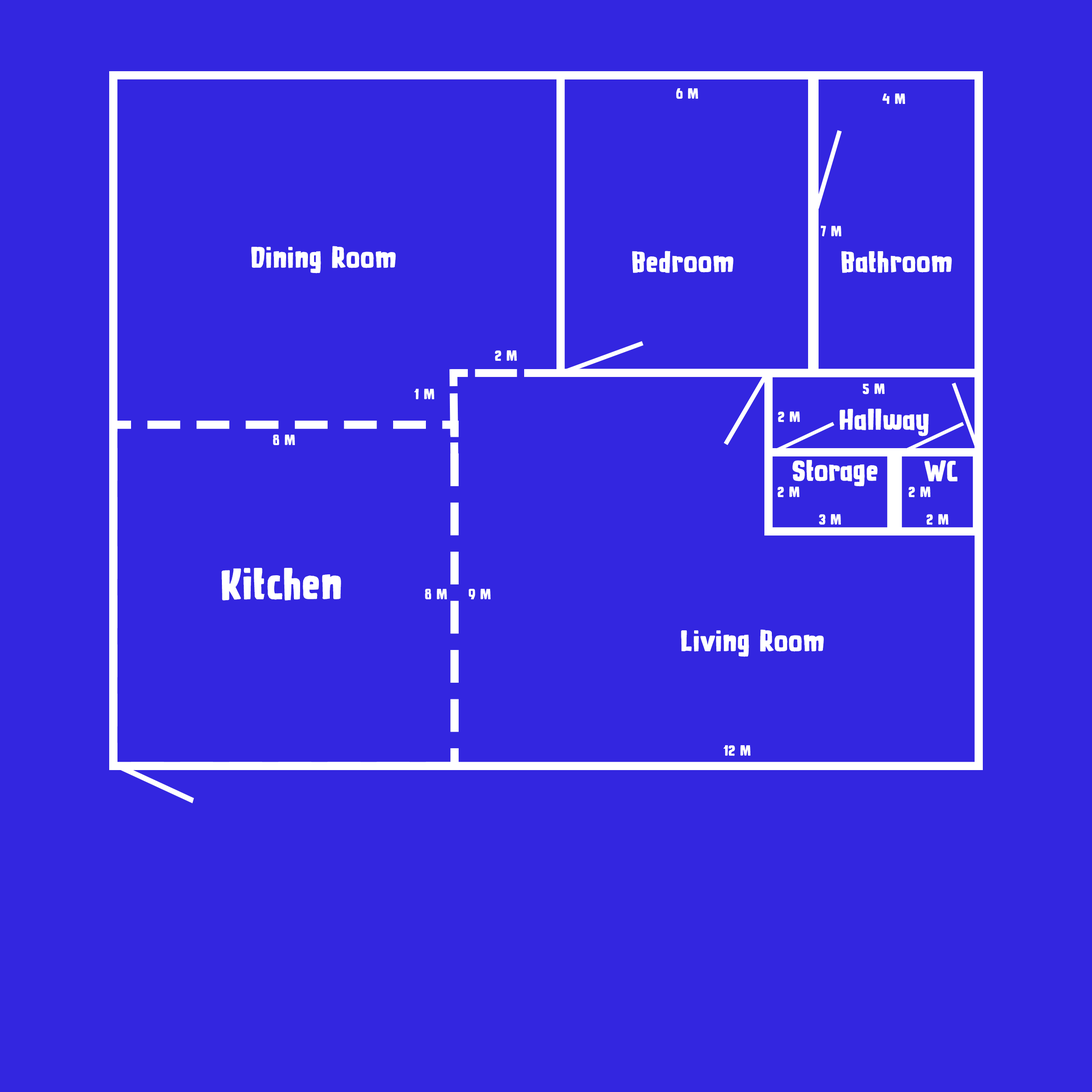
<style>
.page{position:relative;width:1092px;height:1092px;background:#3326e0}
.page>*{position:absolute;margin:0}
.t1{font:13.1px "YellowBalloon";color:#ffffff}
.t2{font:26.2px "YellowBalloon";color:#ffffff}
.t3{font:39.3px "YellowBalloon";color:#ffffff}
</style>
<div class="page">
<p class="t1" style="left:676px;top:88px;width:22px;height:11px">6 M</p>
<p class="t1" style="left:882px;top:93px;width:23px;height:11px">4 M</p>
<p class="t1" style="left:821px;top:225px;width:20px;height:11px">7 M</p>
<p class="t2" style="left:251px;top:246px;width:145px;height:27px">Dining Room</p>
<p class="t2" style="left:632px;top:251px;width:101px;height:22px">Bedroom</p>
<p class="t2" style="left:841px;top:251px;width:111px;height:22px">Bathroom</p>
<p class="t1" style="left:495px;top:350px;width:22px;height:11px">2 M</p>
<p class="t1" style="left:414px;top:389px;width:20px;height:10px">1 M</p>
<p class="t1" style="left:863px;top:384px;width:22px;height:10px">5 M</p>
<p class="t1" style="left:778px;top:411px;width:22px;height:11px">2 M</p>
<p class="t2" style="left:840px;top:408px;width:89px;height:28px">Hallway</p>
<p class="t1" style="left:273px;top:434px;width:22px;height:11px">8 M</p>
<p class="t2" style="left:792px;top:460px;width:86px;height:27px">Storage</p>
<p class="t2" style="left:924px;top:460px;width:33px;height:21px">WC</p>
<p class="t1" style="left:777px;top:487px;width:22px;height:11px">2 M</p>
<p class="t1" style="left:909px;top:487px;width:21px;height:11px">2 M</p>
<p class="t1" style="left:819px;top:514px;width:22px;height:11px">3 M</p>
<p class="t1" style="left:926px;top:514px;width:22px;height:11px">2 M</p>
<p class="t3" style="left:221px;top:568px;width:120px;height:33px">Kitchen</p>
<p class="t1" style="left:425px;top:588px;width:22px;height:11px">8 M</p>
<p class="t1" style="left:469px;top:589px;width:22px;height:11px">9 M</p>
<p class="t2" style="left:681px;top:629px;width:143px;height:28px">Living Room</p>
<p class="t1" style="left:723px;top:745px;width:27px;height:11px">12 M</p>
</div>
